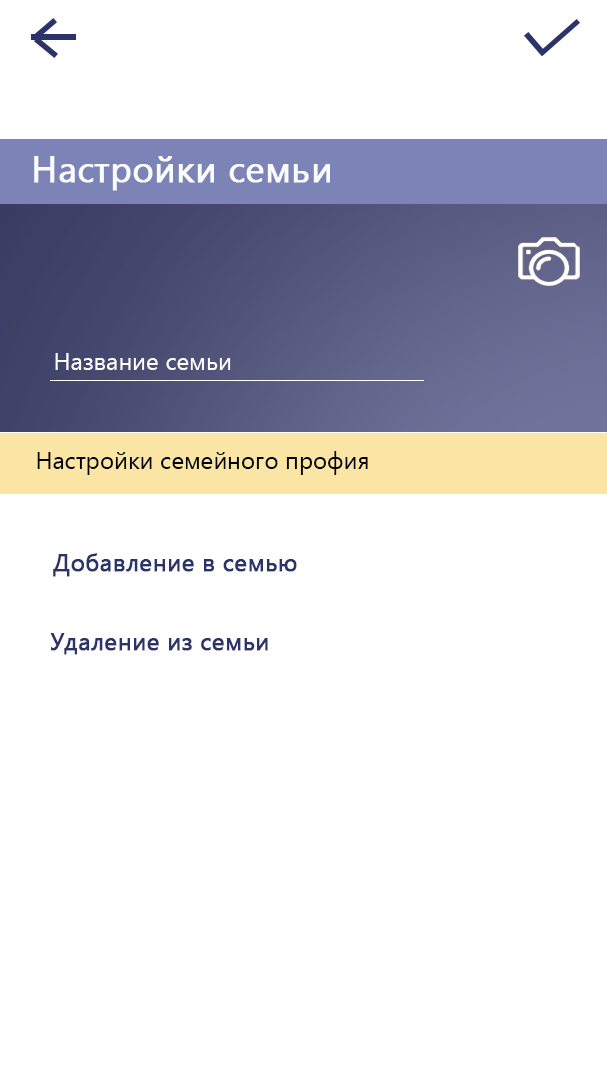
<style>
.page{position:relative;width:607px;height:1080px;background:#ffffff}
.page>*{position:absolute;margin:0}
.t1{font:36px "YuGothicUI-Regular";color:#fbfcff;font-weight:bold}
.t2{font:24px "YuGothicUI-Regular";color:#ffffff}
.t3{font:24px "YuGothicUI-Regular";color:#000000}
.t4{font:24px "YuGothicUI-Regular";color:#2b3368;font-weight:bold}
</style>
<div class="page">
<p class="t1" style="left:34px;top:156px;width:296px;height:35px">Настройки семьи</p>
<p class="t2" style="left:55px;top:353px;width:176px;height:17px">Название семьи</p>
<p class="t3" style="left:37px;top:451px;width:331px;height:24px">Настройки семейного профия</p>
<p class="t4" style="left:53px;top:553px;width:244px;height:24px">Добавление в семью</p>
<p class="t4" style="left:50px;top:633px;width:218px;height:22px">Удаление из семьи</p>
</div>
